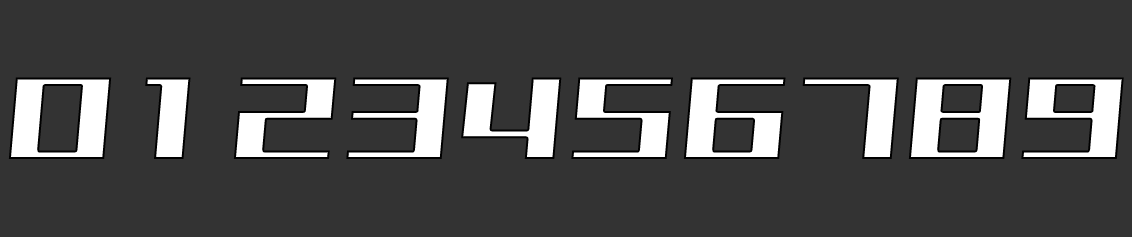
<style>
.page{position:relative;width:1132px;height:237px;background:#333333}
.page>*{position:absolute;margin:0}
.t1{font:144px "851Gkktt";color:#ffffff}
</style>
<div class="page">
<p class="t1" style="left:8px;top:77px;width:1116px;height:82px">0123456789</p>
</div>
